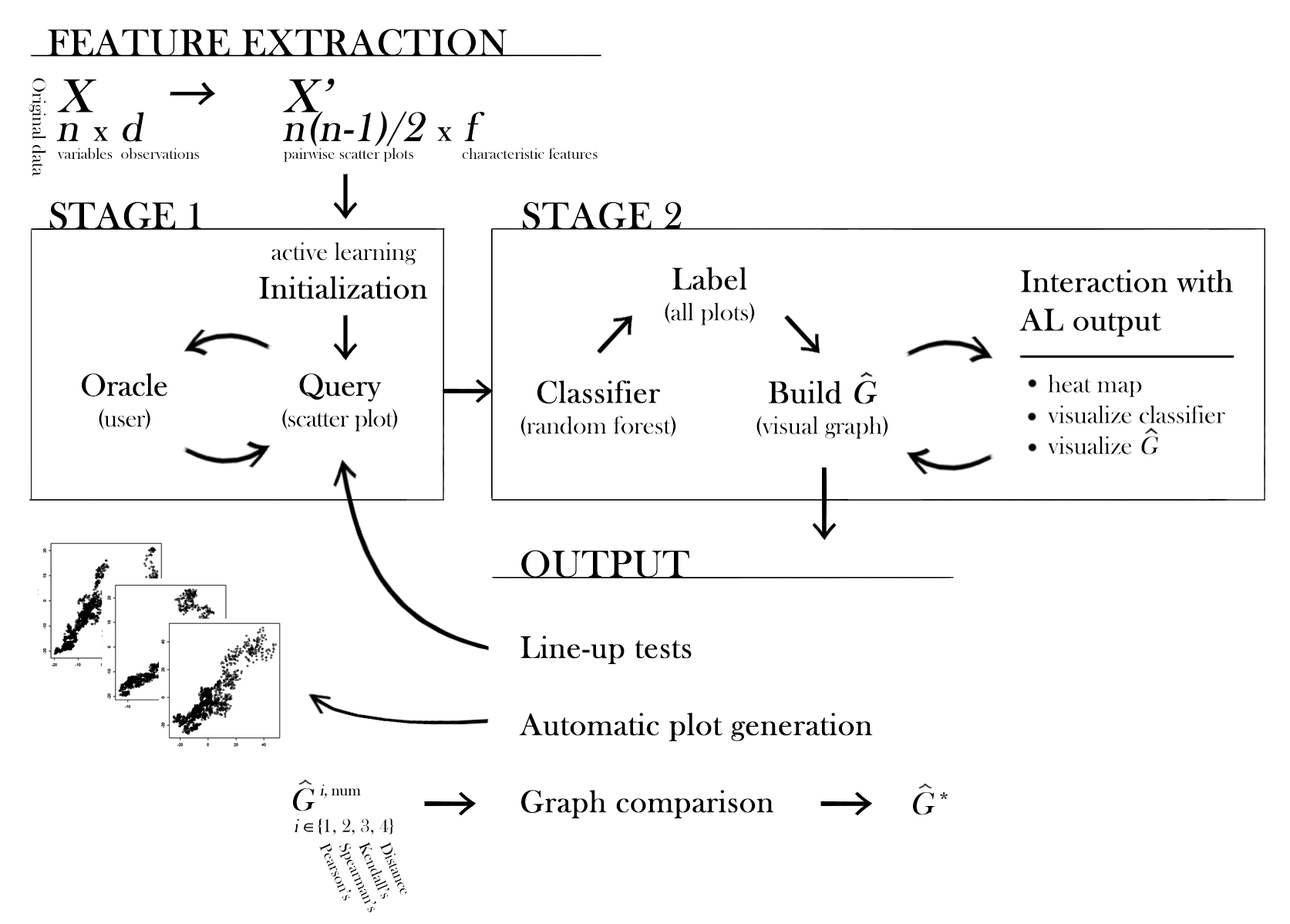
<style>
.page{position:relative;width:1290px;height:924px;background:#ffffff}
.page>*{position:absolute;margin:0}
.t1{font:38.6px "BaskOldFace";color:#000000;font-weight:bold}
.t2{font:19.3px "BaskOldFace";color:#000000}
.t3{font:48.2px "BaskOldFace";color:#000000;font-weight:bold;font-style:italic}
.t4{font:48.2px "KozGoPr6N-Regular";letter-spacing:0.58em;color:#000000;font-weight:bold;font-style:italic}
.t5{font:41.8px "BaskOldFace";color:#000000;font-weight:bold;font-style:italic}
.t6{font:32.1px "BaskOldFace";color:#000000;font-weight:bold}
.t7{font:16.1px "BaskOldFace";color:#000000}
.t8{font:38.6px "BaskOldFace";letter-spacing:-0.02em;color:#000000;text-transform:uppercase;font-weight:bold}
.t9{font:38.6px "BaskOldFace";color:#000000;text-transform:uppercase;font-weight:bold}
.t10{font:25.7px "BaskOldFace";color:#000000}
.t11{font:25.7px "BaskOldFace";color:#000000;font-style:italic}
.t12{font:32.1px "BaskOldFace";letter-spacing:-0.02em;color:#000000;font-weight:bold}
.t13{font:25.7px "BaskOldFace";letter-spacing:-0.02em;color:#000000}
.t14{font:32.1px "BaskOldFace";color:#000000;font-weight:bold;font-style:italic}
.t15{font:19.3px "BaskOldFace";color:#000000;font-style:italic}
.t16{font:19.3px "MyriadPro-Regular";color:#000000}
</style>
<div class="page">
<p class="t1" style="left:48px;top:29px;width:460px;height:27px">FEATURE EXTRACTION</p>
<p class="t2" style="left:29px;top:78px;width:17px;height:99px;rotate:90deg">Original data</p>
<p class="t3" style="left:57px;top:78px;width:278px;height:35px">X  <span class="t4">→ </span>X’</p>
<p class="t5" style="left:56px;top:112px;width:88px;height:30px">n <span class="t6">x</span> d</p>
<p class="t5" style="left:283px;top:111px;width:202px;height:36px">n(n-1)/2 <span class="t6">x</span> f</p>
<p class="t7" style="left:57px;top:147px;width:142px;height:13px">variables  observations</p>
<p class="t7" style="left:284px;top:147px;width:314px;height:15px">pairwise scatter plots            characteristic features</p>
<p class="t8" style="left:49px;top:201px;width:152px;height:29px">stage 1</p>
<p class="t9" style="left:523px;top:201px;width:159px;height:29px">stage 2</p>
<p class="t10" style="left:259px;top:242px;width:169px;height:57px;text-align:center">active learning <span class="t6">Initialization</span></p>
<p class="t10" style="left:665px;top:267px;width:90px;height:59px;text-align:center"><span class="t6">Label<br></span>(all plots)</p>
<p class="t10" style="left:1020px;top:269px;width:213px;height:185px"><span class="t6">Interaction with <br>AL output<br></span><br> heat map<br> visualize classifier<br> visualize <span class="t11">G</span></p>
<p class="t12" style="left:82px;top:373px;width:85px;height:57px;text-align:center">Oracle<br><span class="t13">(user)</span></p>
<p class="t13" style="left:282px;top:373px;width:116px;height:59px;text-align:center"><span class="t12">Query<br></span>(scatter plot)</p>
<p class="t10" style="left:521px;top:380px;width:155px;height:57px;text-align:center"><span class="t6">Classifier<br></span>(random forest)</p>
<p class="t10" style="left:757px;top:380px;width:132px;height:59px;text-align:center"><span class="t6">Build </span><span class="t14">G<br></span>(visual graph)</p>
<p class="t1" style="left:521px;top:550px;width:169px;height:28px">OUTPUT</p>
<p class="t6" style="left:519px;top:636px;width:354px;height:182px">Line-up tests<br><br>Automatic plot generation<br><br>Graph comparison</p>
<p class="t2" style="left:294px;top:818px;width:100px;height:17px"><span class="t15">i </span><span class="t16">∈ </span>{1, 2, 3, 4}</p>
<p class="t7" style="left:319px;top:842px;width:32px;height:59px;rotate:66deg">Pearson’s</p>
<p class="t7" style="left:339px;top:843px;width:37px;height:69px;rotate:66deg">Spearman’s</p>
<p class="t7" style="left:359px;top:841px;width:31px;height:58px;rotate:67deg">Kendall’s</p>
<p class="t7" style="left:379px;top:842px;width:28px;height:54px;rotate:67deg">Distance</p>
</div>
